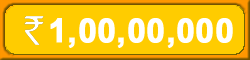
<style>
.page{position:relative;width:250px;height:60px;background:#ffcc00}
.page>*{position:absolute;margin:0}
.t1{font:33.3px "Arial-BoldMT";color:#ffffff;font-weight:bold}
</style>
<div class="page">
<p class="t1" style="left:50px;top:18px;width:183px;height:30px">1,00,00,000</p>
</div>
